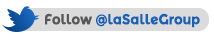
<style>
.page{position:relative;width:214px;height:41px;background:#ffffff}
.page>*{position:absolute;margin:0}
.t1{font:14.6px "MontserratAlternates-Bold";letter-spacing:-0.01em;color:#1761b6;scale:0.93 1}
.t2{font:14.6px "MontserratAlternates-Bold";letter-spacing:-0.01em;color:#585858;scale:0.93 1}
</style>
<div class="page">
<p class="t1" style="left:45px;top:13px;width:155px;height:15px"><span class="t2">Follow </span>@laSalleGroup</p>
</div>
